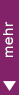
<style>
.page{position:relative;width:19px;height:95px;background:#822269}
.page>*{position:absolute;margin:0}
.t1{font:14px "ArialMT";letter-spacing:0.05em;color:#ffffff;scale:1.06 1}
</style>
<div class="page">
<p class="t1" style="left:3px;top:21px;width:10px;height:36px;rotate:-90deg">mehr</p>
</div>
